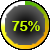
<style>
.page{position:relative;width:50px;height:50px;background:#ffffff}
.page>*{position:absolute;margin:0}
.t1{font:14px "ArialRoundedMTBold";color:#ccff00}
</style>
<div class="page">
<p class="t1" style="left:12px;top:21px;width:28px;height:11px">75%</p>
</div>
